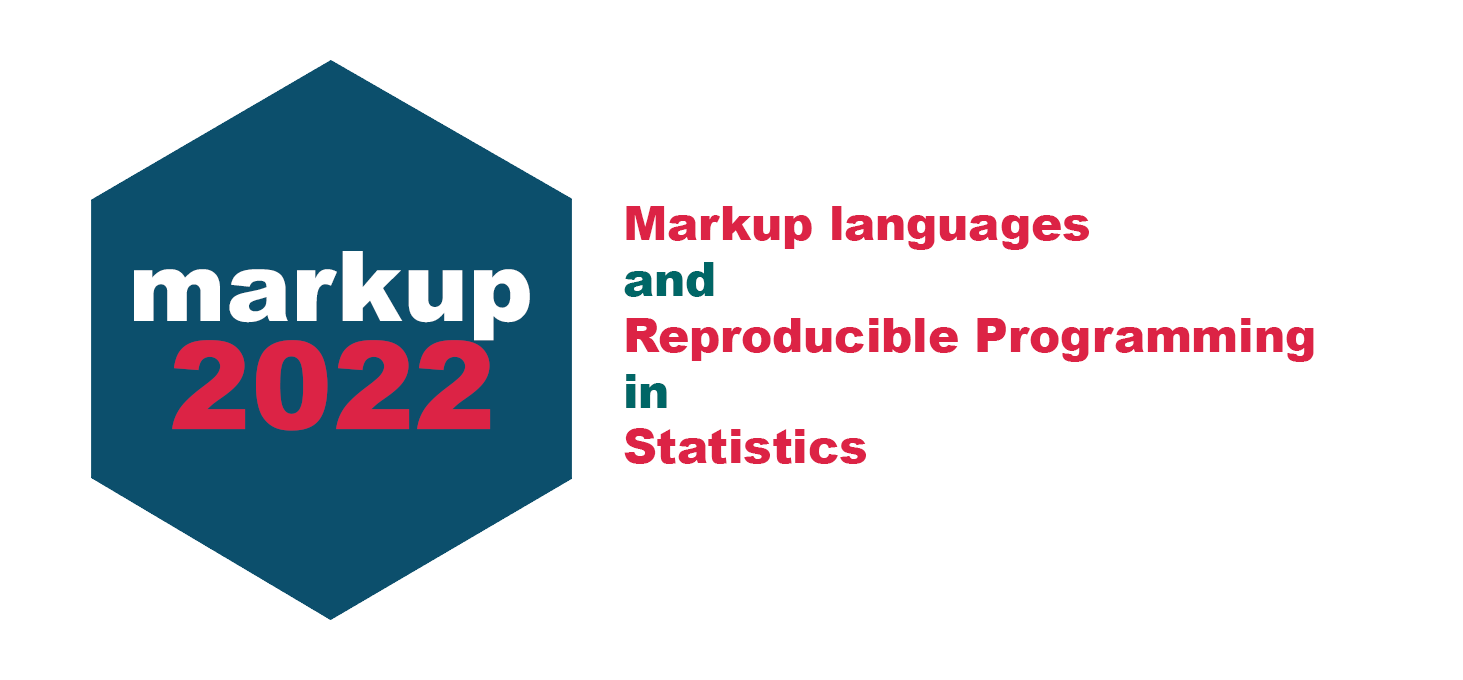
<style>
.page{position:relative;width:1463px;height:680px;background:#ffffff}
.page>*{position:absolute;margin:0}
.t1{font:46.6px "Arial-Black";color:#dc2345}
.t2{font:46.6px "Arial-Black";color:#006666}
.t3{font:97.8px "Arial-Black";color:#ffffff}
.t4{font:122.3px "Arial-Black";color:#dc2345}
</style>
<div class="page">
<p class="t1" style="left:624px;top:206px;width:690px;height:258px">Markup languages<br><span class="t2">and<br></span>Reproducible Programming<br><span class="t2">in<br></span>Statistics</p>
<p class="t3" style="left:134px;top:251px;width:396px;height:90px">markup</p>
<p class="t4" style="left:172px;top:340px;width:319px;height:91px">2022</p>
</div>
